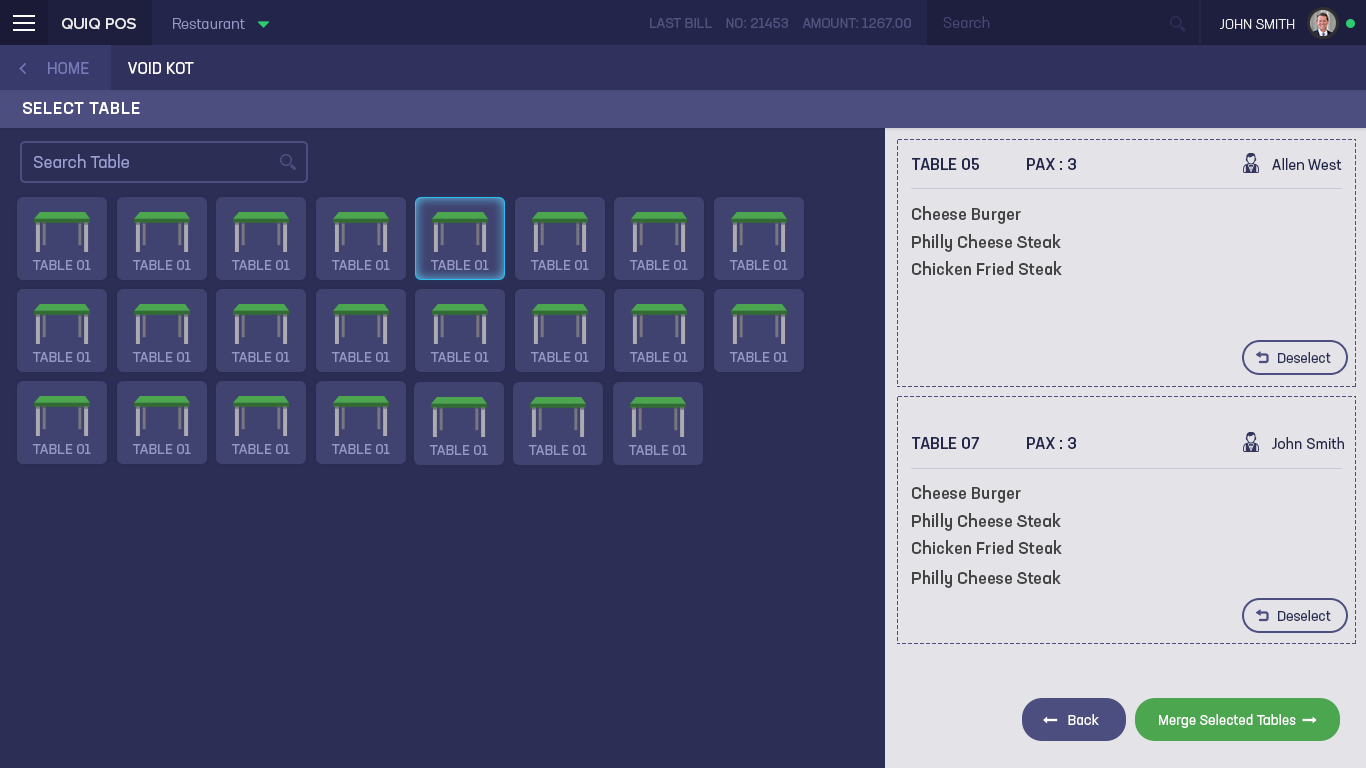
<style>
.page{position:relative;width:1366px;height:768px;background:#2c2e56}
.page>*{position:absolute;margin:0}
.t1{font:15px "NeusaNextStd-Light";color:#474975}
.t2{font:16px "ProximaNova-Medium";color:#ededed}
.t3{font:15px "NeusaNextStd-Light";color:#9597c4}
.t4{font:14px "NeusaNextStd-Regular";color:#50537d;text-transform:uppercase}
.t5{font:14px "NeusaNextStd-Light";color:#ededed;text-transform:uppercase}
.t6{font:16px "NeusaNextStd-Regular";color:#767ab5;text-transform:uppercase}
.t7{font:16px "NeusaNextStd-Regular";color:#ffffff;text-transform:uppercase}
.t8{font:17px "NeusaNextStd-Medium";letter-spacing:0.04em;color:#ffffff;text-transform:uppercase}
.t9{font:17px "NeusaNextStd-Regular";color:#9c9fd1}
.t10{font:16px "NeusaNextStd-Medium";color:#23254a;text-transform:uppercase}
.t11{font:15px "NeusaNextStd-Regular";color:#23254a}
.t12{font:17px "NeusaNextStd-Medium";color:#444444}
.t13{font:14px "NeusaNextStd-Regular";color:#2c2e56}
</style>
<div class="page">
<p class="t1" style="left:943px;top:16px;width:47px;height:12px">Search</p>
<p class="t2" style="left:62px;top:18px;width:74px;height:12px">QUIQ POS</p>
<p class="t3" style="left:173px;top:18px;width:72px;height:11px">Restaurant</p>
<p class="t4" style="left:650px;top:18px;width:261px;height:10px">Last Bill    NO: 21453    Amount: 1267.00</p>
<p class="t5" style="left:1220px;top:19px;width:75px;height:10px">John Smith</p>
<p class="t6" style="left:48px;top:62px;width:41px;height:12px">Home</p>
<p class="t7" style="left:128px;top:62px;width:66px;height:12px">Void Kot</p>
<p class="t8" style="left:23px;top:102px;width:117px;height:12px">Select Table</p>
<p class="t9" style="left:34px;top:154px;width:95px;height:14px">Search Table</p>
<p class="t10" style="left:912px;top:158px;width:67px;height:12px">Table 05</p>
<p class="t10" style="left:1027px;top:158px;width:49px;height:12px">PAX : 3</p>
<p class="t11" style="left:1272px;top:158px;width:70px;height:12px">Allen West</p>
<p class="t12" style="left:912px;top:206px;width:109px;height:18px">Cheese Burger</p>
<p class="t12" style="left:912px;top:234px;width:149px;height:18px">Philly Cheese Steak</p>
<p class="t12" style="left:912px;top:261px;width:150px;height:14px">Chicken Fried Steak</p>
<p class="t13" style="left:1278px;top:352px;width:53px;height:11px">Deselect</p>
<p class="t10" style="left:912px;top:437px;width:67px;height:12px">Table 07</p>
<p class="t10" style="left:1027px;top:437px;width:49px;height:12px">PAX : 3</p>
<p class="t11" style="left:1272px;top:437px;width:72px;height:12px">John Smith</p>
<p class="t12" style="left:912px;top:485px;width:109px;height:18px">Cheese Burger</p>
<p class="t12" style="left:912px;top:513px;width:149px;height:18px">Philly Cheese Steak</p>
<p class="t12" style="left:912px;top:540px;width:150px;height:14px">Chicken Fried Steak</p>
<p class="t12" style="left:912px;top:570px;width:149px;height:18px">Philly Cheese Steak</p>
<p class="t13" style="left:1278px;top:610px;width:53px;height:11px">Deselect</p>
</div>
